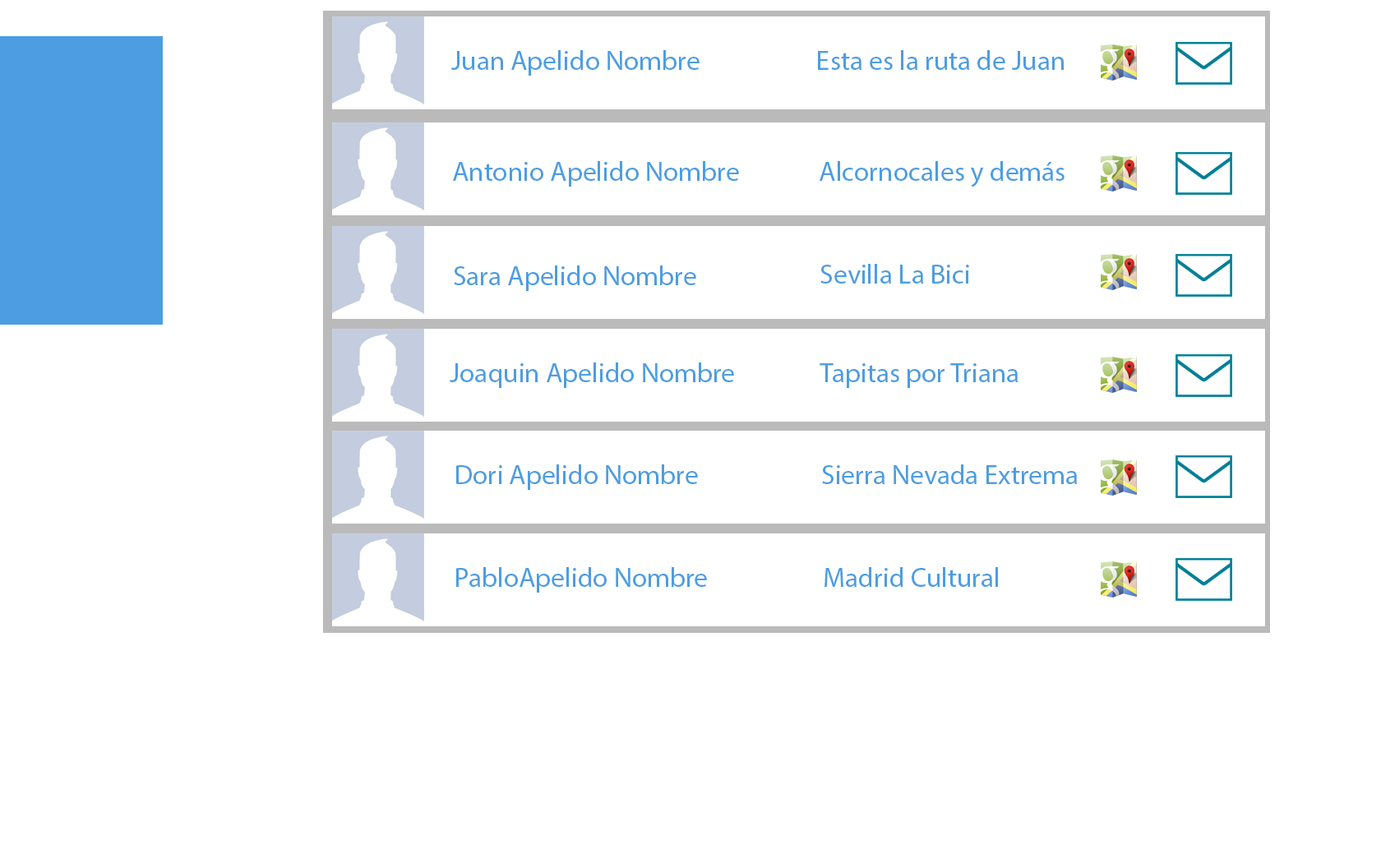
<style>
.page{position:relative;width:1381px;height:863px;background:#ffffff}
.page>*{position:absolute;margin:0}
.t1{font:27.4px "MyriadPro-Regular";color:#4c9de2}
</style>
<div class="page">
<p class="t1" style="left:451px;top:50px;width:249px;height:26px">Juan Apelido Nombre</p>
<p class="t1" style="left:818px;top:50px;width:246px;height:20px">Esta es la ruta de Juan</p>
<p class="t1" style="left:453px;top:161px;width:286px;height:26px">Antonio Apelido Nombre</p>
<p class="t1" style="left:820px;top:161px;width:245px;height:26px">Alcornocales y demás</p>
<p class="t1" style="left:454px;top:266px;width:242px;height:25px">Sara Apelido Nombre</p>
<p class="t1" style="left:821px;top:264px;width:148px;height:20px">Sevilla La Bici</p>
<p class="t1" style="left:450px;top:363px;width:284px;height:25px">Joaquin Apelido Nombre</p>
<p class="t1" style="left:820px;top:363px;width:198px;height:25px">Tapitas por Triana</p>
<p class="t1" style="left:456px;top:465px;width:242px;height:25px">Dori Apelido Nombre</p>
<p class="t1" style="left:822px;top:465px;width:255px;height:19px">Sierra Nevada Extrema</p>
<p class="t1" style="left:456px;top:567px;width:251px;height:26px">PabloApelido Nombre</p>
<p class="t1" style="left:825px;top:567px;width:173px;height:20px">Madrid Cultural</p>
</div>
